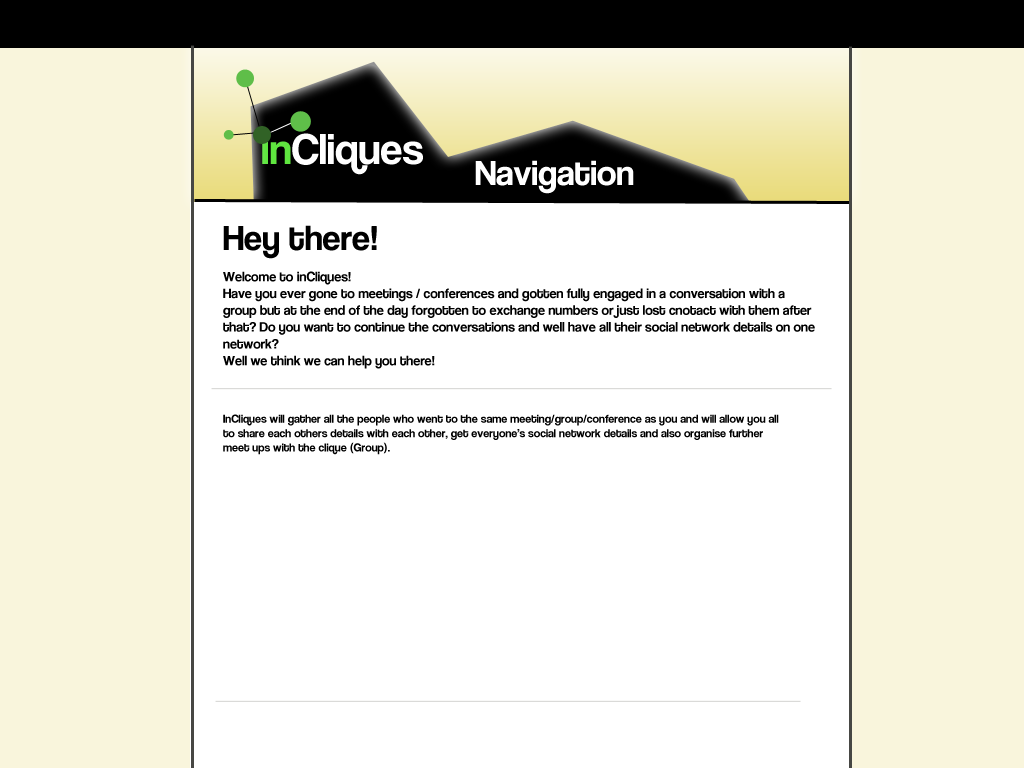
<style>
.page{position:relative;width:1024px;height:768px;background:#ffffff}
.page>*{position:absolute;margin:0}
.t1{font:44.6px "CoolveticaRg-Regular";color:#ffffff}
.t2{font:44.6px "CoolveticaRg-Regular";color:#5fe63f}
.t3{font:36px "CoolveticaRg-Regular";color:#ffffff}
.t4{font:14px "CoolveticaRg-Regular";color:#000000}
.t5{font:36px "CoolveticaRg-Regular";color:#000000}
.t6{font:12px "CoolveticaRg-Regular";color:#000000}
</style>
<div class="page">
<p class="t1" style="left:262px;top:133px;width:161px;height:42px"><span class="t2">in</span>Cliques</p>
<p class="t3" style="left:475px;top:160px;width:159px;height:34px">Navigation</p>
<p class="t4" style="left:223px;top:225px;width:592px;height:230px"><span class="t5">Hey there!<br><br></span>Welcome to inCliques! <br>Have you ever gone to meetings / conferences and gotten fully engaged in a conversation with a <br>group but at the end of the day forgotten to exchange numbers or just lost cnotact with them after <br>that? Do you want to continue the conversations and well have all their social network details on one <br>network?<br>Well we think we can help you there!<br><span class="t6"><br><br><br>InCliques will gather all the people who went to the same meeting/group/conference as you and will allow you all<br>to share each others details with each other, get everyone’s social network details and also organise further<br>meet ups with the clique (Group).</span></p>
</div>
